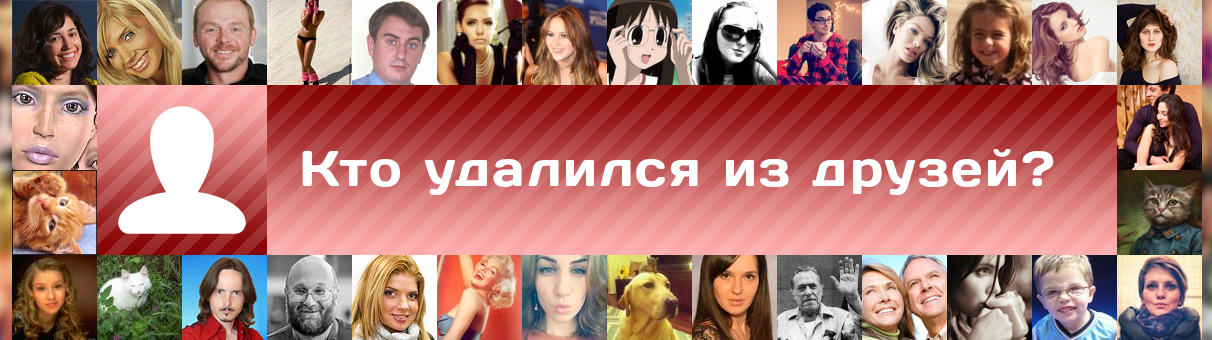
<style>
.page{position:relative;width:1212px;height:340px}
.page>*{position:absolute;margin:0}
.t1{font:49.5px "Days";letter-spacing:0.05em;color:#ffffff}
</style>
<div class="page">
<p class="t1" style="left:302px;top:149px;width:752px;height:46px">Кто удалился из друзей?</p>
</div>
